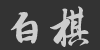
<style>
.page{position:relative;width:100px;height:50px;background:#333333}
.page>*{position:absolute;margin:0}
.t1{font:44.3px "SCFwxz";color:#cdcdcd}
</style>
<div class="page">
<p class="t1" style="left:10px;top:6px;width:79px;height:41px">白棋</p>
</div>
